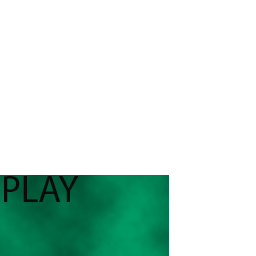
<style>
.page{position:relative;width:256px;height:256px;background:#ffffff}
.page>*{position:absolute;margin:0}
.t1{font:37.7px "MyriadPro-Regular";color:#0b0b0b}
</style>
<div class="page">
<p class="t1" style="left:4px;top:176px;width:75px;height:26px">PLAY</p>
</div>
